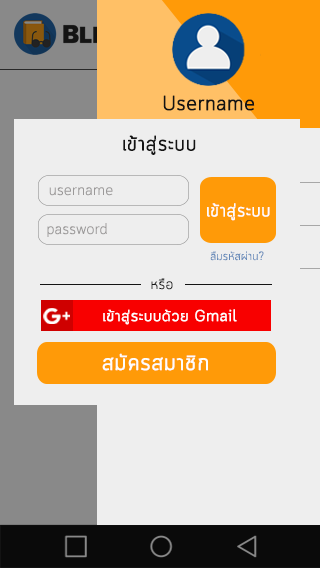
<style>
.page{position:relative;width:320px;height:568px;background:#eeeeee}
.page>*{position:absolute;margin:0}
.t1{font:20px "Cloud-Light";color:#141414;font-weight:bold}
.t2{font:20.5px "Cloud-Light";color:#141414;font-weight:bold}
.t3{font:15px "Cloud-Light";color:#9b9999}
.t4{font:18px "Cloud-Light";color:#fefcfc;font-weight:bold}
.t5{font:12px "Cloud-Light";color:#6489b9}
.t6{font:15px "Cloud-Light";color:#141414}
.t7{font:15.5px "Cloud-Light";color:#fefefe;font-weight:bold;scale:1.04 1}
.t8{font:22.4px "Cloud-Light";color:#fdfdfc;font-weight:bold}
</style>
<div class="page">
<p class="t1" style="left:163px;top:95px;width:92px;height:16px">Username</p>
<p class="t2" style="left:123px;top:135px;width:73px;height:20px">เข้าสู่ระบบ</p>
<p class="t3" style="left:49px;top:187px;width:64px;height:9px">username</p>
<p class="t4" style="left:207px;top:203px;width:63px;height:18px">เข้าสู่ระบบ</p>
<p class="t3" style="left:47px;top:223px;width:60px;height:14px">password</p>
<p class="t5" style="left:210px;top:251px;width:54px;height:10px">ลืมรหัสผ่าน?</p>
<p class="t6" style="left:151px;top:278px;width:22px;height:12px">หรือ</p>
<p class="t7" style="left:103px;top:309px;width:134px;height:16px">เข้าสู่ระบบด้วย Gmail</p>
<p class="t8" style="left:102px;top:353px;width:106px;height:18px">สมัครสมาชิก</p>
</div>
